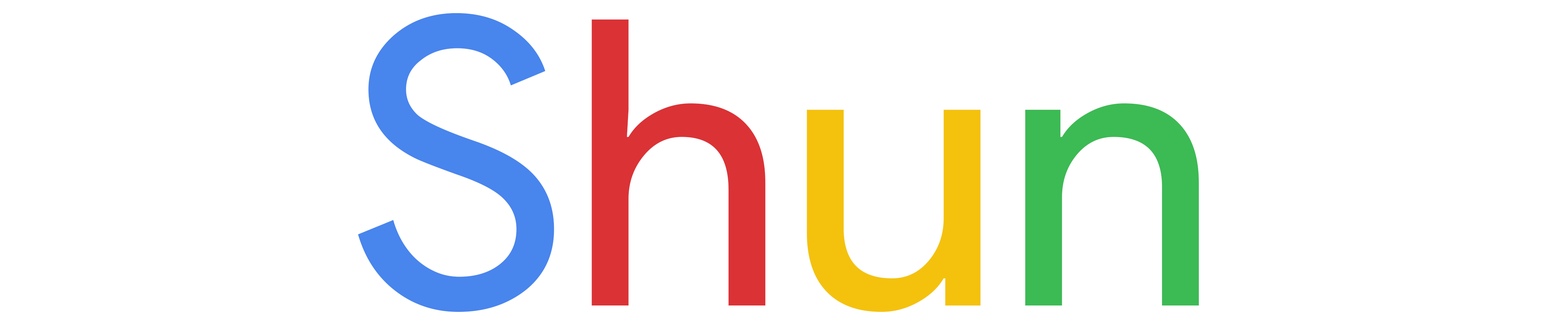
<style>
.page{position:relative;width:1568px;height:313px;background:#ffffff}
.page>*{position:absolute;margin:0}
.t1{font:399.8px "ProductSans-Regular";color:#4885ed}
.t2{font:399.8px "ProductSans-Regular";color:#db3236}
.t3{font:399.8px "ProductSans-Regular";color:#f4c20d}
.t4{font:399.8px "ProductSans-Regular";color:#3cba54}
</style>
<div class="page">
<p class="t1" style="left:358px;top:13px;width:841px;height:300px">S<span class="t2">h</span><span class="t3">u</span><span class="t4">n</span></p>
</div>
